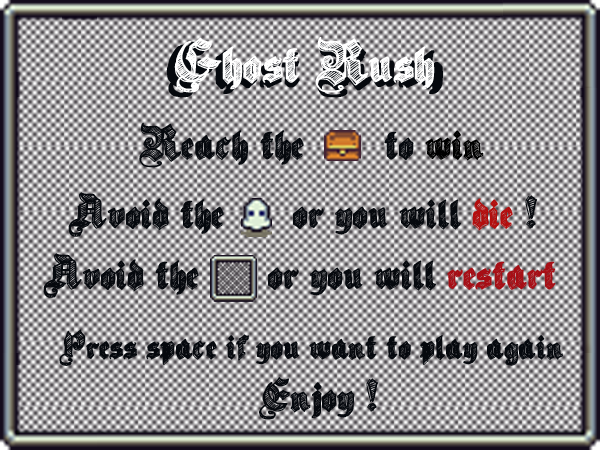
<style>
.page{position:relative;width:600px;height:450px}
.page>*{position:absolute;margin:0}
.t1{font:60px "SketchGothicSchool";letter-spacing:-0.01em;color:#ffffff}
.t2{font:48px "SketchGothicSchool";letter-spacing:-0.01em;color:#06090e}
.t3{font:48px "SketchGothicSchool";letter-spacing:-0.01em;color:#000000}
.t4{font:48px "SketchGothicSchool";letter-spacing:-0.01em;color:#b30e0e}
.t5{font:48px "SketchGothicSchool";letter-spacing:-0.01em;color:#a70e15}
.t6{font:40px "SketchGothicSchool";letter-spacing:-0.01em;color:#06090e}
</style>
<div class="page">
<p class="t1" style="left:174px;top:37px;width:261px;height:56px">Ghost Rush</p>
<p class="t2" style="left:139px;top:122px;width:345px;height:46px">Reach the       to <span class="t3">win</span></p>
<p class="t2" style="left:68px;top:192px;width:470px;height:45px">Avoid the      or you will <span class="t4">die</span> !</p>
<p class="t2" style="left:43px;top:253px;width:513px;height:45px">Avoid the      or you will <span class="t5">restart</span></p>
<p class="t6" style="left:59px;top:329px;width:504px;height:37px">Press space if you want to play again</p>
<p class="t2" style="left:259px;top:377px;width:120px;height:43px">Enjoy !</p>
</div>
